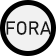
<style>
.page{position:relative;width:56px;height:56px;background:#f1f1f1}
.page>*{position:absolute;margin:0}
.t1{font:19px "Bahnschrift";color:#191919}
</style>
<div class="page">
<p class="t1" style="left:6px;top:21px;width:46px;height:14px">FORA</p>
</div>
